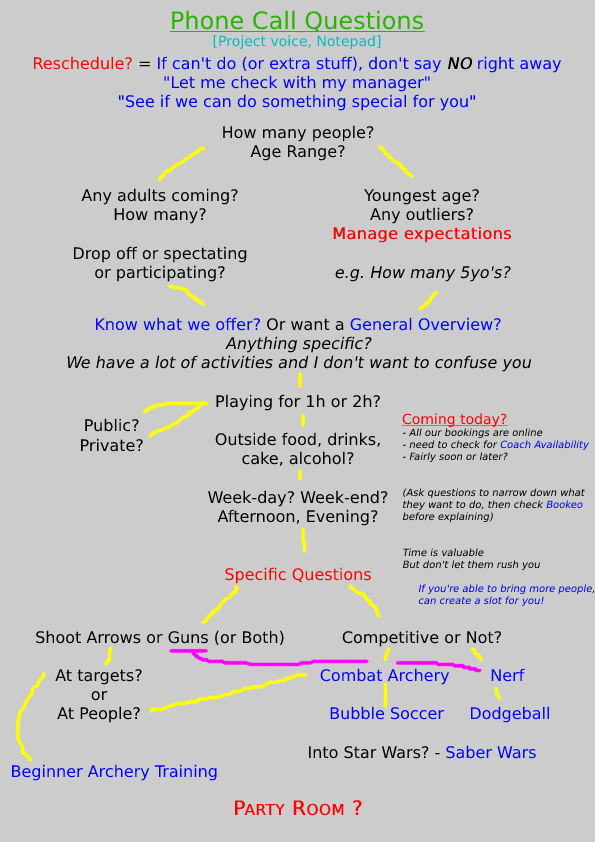
<style>
.page{position:relative;width:595px;height:842px;background:#cccccc}
.page>*{position:absolute;margin:0}
.t1{font:14px "DejaVuSans";color:#00bdbd}
.t2{font:24px "DejaVuSans";color:#2ab200;text-decoration:underline}
.t3{font:16px "DejaVuSans";color:#0000ff}
.t4{font:16px "DejaVuSans";color:#ff0000}
.t5{font:16px "DejaVuSans";color:#000000}
.t6{font:16px "DejaVuSans";color:#000000;font-weight:bold;font-style:italic}
.t7{font:16px "DejaVuSans";color:#000000;font-style:italic}
.t8{font:20px "DejaVuSans";color:#ff0000;font-variant:small-caps;font-weight:bold}
.t9{font:16px "DejaVuSans";color:#ff0000;font-weight:bold}
.t10{font:10px "DejaVuSans";color:#000000;font-style:italic}
.t11{font:14px "DejaVuSans";color:#ff0000;text-decoration:underline}
.t12{font:10px "DejaVuSans";color:#0000ff;font-style:italic}
</style>
<div class="page">
<p class="t1" style="left:169px;top:10px;width:256px;height:39px;text-align:center"><span class="t2">Phone Call Questions<br></span>[Project voice, Notepad]</p>
<p class="t3" style="left:34px;top:56px;width:528px;height:55px;text-align:center"><span class="t4">Reschedule? </span><span class="t5">= </span>If can't do (or extra stuff), don't say <span class="t6">NO </span>right away<br>"Let me check with my manager"<br>"See if we can do something special for you"</p>
<p class="t5" style="left:67px;top:125px;width:465px;height:691px;text-align:center">How many people?<br>Age Range?<br><br><br><br><br><br><br><br><br><span class="t3">Know what we offer? </span>Or want a <span class="t3">General Overview?<br></span><span class="t7">Anything specific?<br>We have a lot of activities and I don't want to confuse you<br><br></span>Playing for 1h or 2h?<br><br>Outside food, drinks,<br>cake, alcohol?<br><br>Week-day? Week-end?<br>Afternoon, Evening?<br><br><br><span class="t4">Specific Questions<br><br><br><br><br><br><br><br><br><br><br><br></span><span class="t8">Party Room ?</span></p>
<p class="t5" style="left:12px;top:188px;width:272px;height:593px;text-align:center">Any adults coming?<br>How many?<br><br>Drop off or spectating<br>or participating?<br><br><br><br><br><br><br><br>Public?                   <br>Private?                   <br><br><br><br><br><br><br><br><br><br>Shoot Arrows or Guns (or Both)<br><br>At targets?                        <br>or                        <br>At People?                        <br><br><br><span class="t3">Beginner Archery Training</span></p>
<p class="t3" style="left:309px;top:189px;width:240px;height:570px;text-align:center"><span class="t5">Youngest age?<br>Any outliers?<br></span><span class="t9">Manage expectations<br><br></span><span class="t7">e.g. How many 5yo's?<br><br><br><br><br><br><br><br><br><br><br><br><br><br><br><br><br><br><br></span><span class="t5">Competitive or Not?<br><br></span>Combat Archery        Nerf<br><br>       Bubble Soccer     Dodgeball<br><br><span class="t5">Into Star Wars? - </span>Saber Wars</p>
<p class="t10" style="left:402px;top:413px;width:193px;height:194px"><span class="t11">Coming today?<br></span>- All our bookings are online<br>- need to check for <span class="t12">Coach Availability<br></span>- Fairly soon or later?<br><br><br>(Ask questions to narrow down what<br>they want to do, then check <span class="t12">Bookeo<br></span>before explaining)<br><br><br>Time is valuable<br>But don't let them rush you<br><br>     <span class="t12">If you're able to bring more people,<br>     can create a slot for you!</span></p>
</div>
